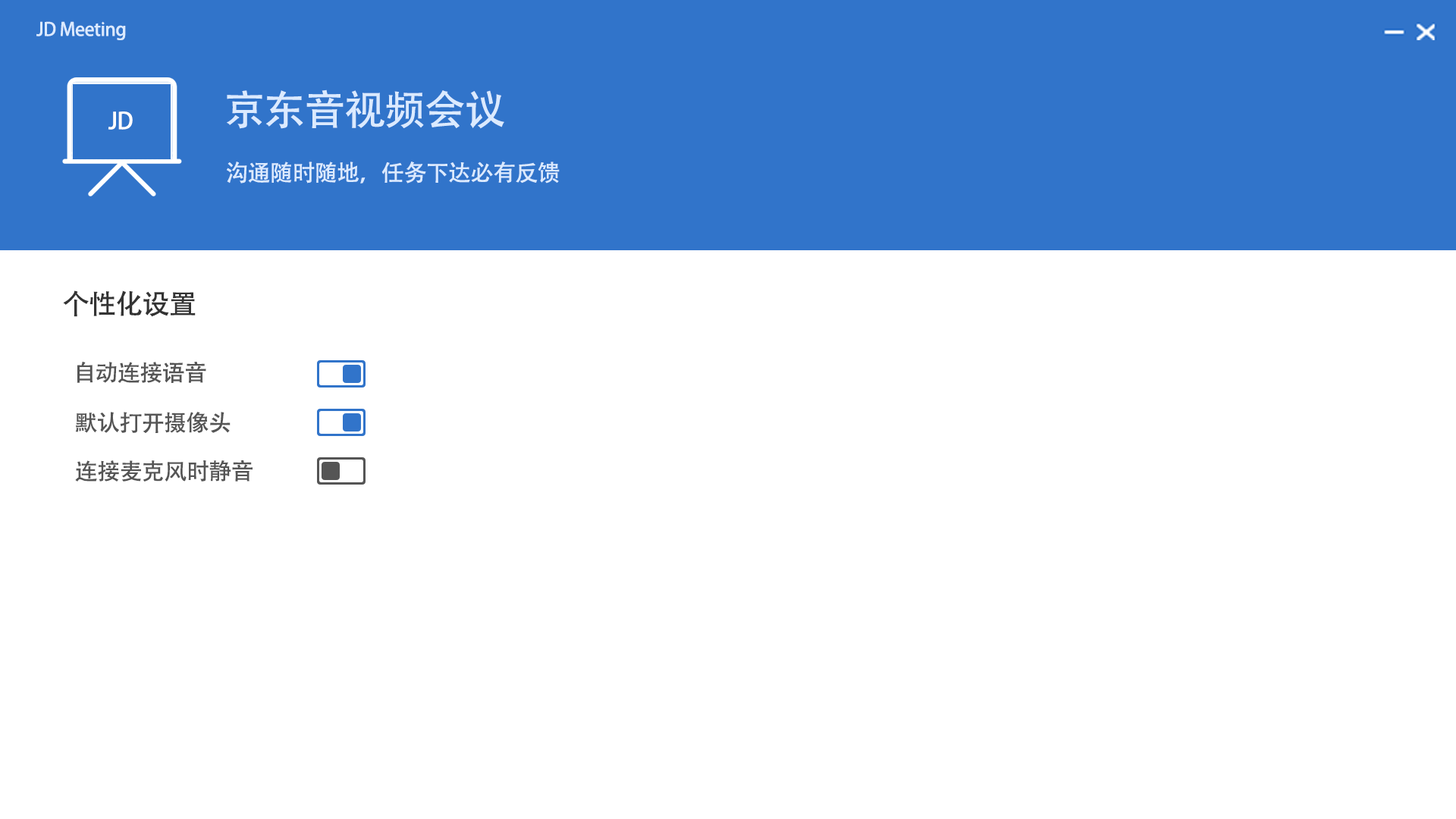
<style>
.page{position:relative;width:1456px;height:819px;background:#ffffff}
.page>*{position:absolute;margin:0}
.t1{font:18.2px "AdobeHeitiStd-Regular";letter-spacing:-0.02em;color:#dbeaff}
.t2{font:40.9px "AdobeHeitiStd-Regular";letter-spacing:-0.02em;color:#dbeaff}
.t3{font:22.7px "AdobeHeitiStd-Regular";letter-spacing:-0.02em;color:#fefefe}
.t4{font:22.7px "AdobeHeitiStd-Regular";letter-spacing:-0.02em;color:#dbeaff}
.t5{font:27.3px "AdobeHeitiStd-Regular";letter-spacing:-0.02em;color:#333333}
.t6{font:22.7px "AdobeHeitiStd-Regular";letter-spacing:-0.02em;color:#555555}
</style>
<div class="page">
<p class="t1" style="left:36px;top:21px;width:90px;height:19px">JD Meeting</p>
<p class="t2" style="left:227px;top:89px;width:277px;height:40px">京东音视频会议</p>
<p class="t3" style="left:108px;top:111px;width:25px;height:19px">JD</p>
<p class="t4" style="left:227px;top:162px;width:333px;height:22px">沟通随时随地，任务下达必有反馈</p>
<p class="t5" style="left:63px;top:290px;width:133px;height:27px">个性化设置</p>
<p class="t6" style="left:77px;top:362px;width:129px;height:21px">自动连接语音</p>
<p class="t6" style="left:75px;top:412px;width:156px;height:21px">默认打开摄像头</p>
<p class="t6" style="left:75px;top:460px;width:178px;height:22px">连接麦克风时静音</p>
</div>
